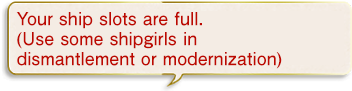
<style>
.page{position:relative;width:352px;height:91px;background:#f4ece4}
.page>*{position:absolute;margin:0}
.t1{font:18px/20px "FutoGoB101Pr5-Bold";color:#bd0800}
</style>
<div class="page">
<p class="t1" style="left:16px;top:11px;width:266px;height:58px">Your ship slots are full.<br>(Use some shipgirls in<br>dismantlement or modernization)</p>
</div>
